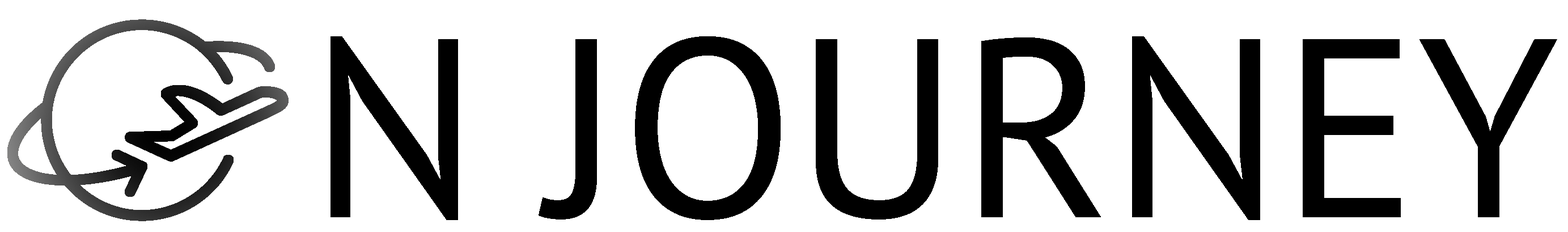
<style>
.page{position:relative;width:1568px;height:232px;background:#ffffff}
.page>*{position:absolute;margin:0}
.t1{font:253.6px "PTSans-Regular";color:#000000}
</style>
<div class="page">
<p class="t1" style="left:330px;top:36px;width:1227px;height:184px">N JOURNEY</p>
</div>
